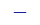
<style>
.page{position:relative;width:40px;height:25px;background:#ffffff}
.page>*{position:absolute;margin:0}
.t1{font:24px "TimesNewRomanPSMT";color:#151fa0}
</style>
<div class="page">
<p class="t1" style="left:13px;top:12px;width:14px;height:1px">_</p>
</div>
